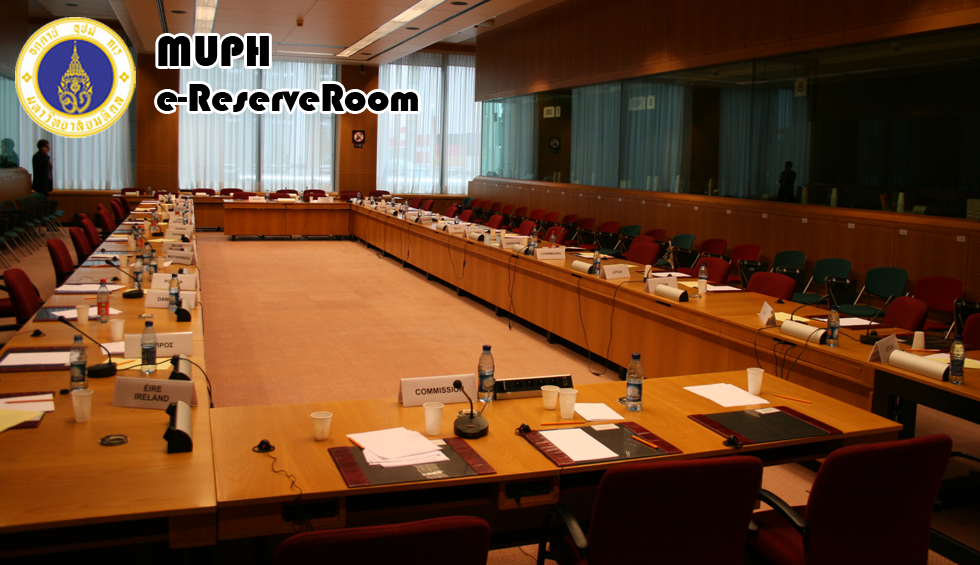
<style>
.page{position:relative;width:980px;height:565px}
.page>*{position:absolute;margin:0}
.t1{font:45px "Bauhaus93";color:#000000}
.t2{font:40px "Bauhaus93";color:#000000}
</style>
<div class="page">
<p class="t1" style="left:158px;top:36px;width:111px;height:30px">MUPH</p>
<p class="t2" style="left:157px;top:84px;width:261px;height:28px">e-ReserveRoom</p>
</div>
